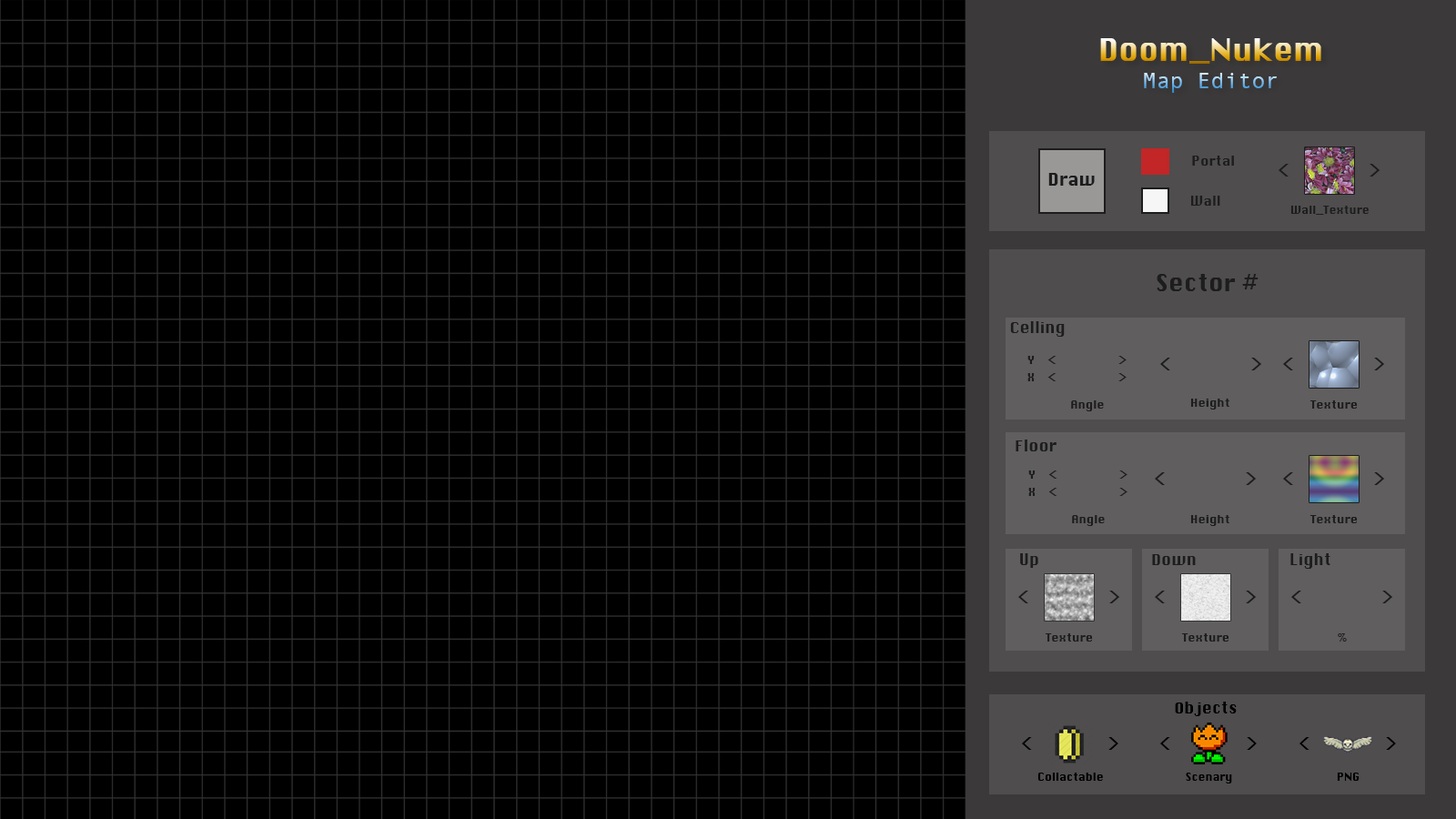
<style>
.page{position:relative;width:1456px;height:819px;background:#000000}
.page>*{position:absolute;margin:0}
.t1{font:30.3px "Silom"}
.t2{font:22.7px "AndaleMono"}
.t3{font:13.3px "Silom";color:#1d1d1d}
.t4{font:17.1px "Silom";color:#1d1d1d}
.t5{font:21.5px "Silom";color:#1d1d1d}
.t6{font:10.8px "Silom";color:#1d1d1d}
.t7{font:22.7px "Silom";color:#1d1d1d}
.t8{font:15.2px "Silom";color:#1d1d1d}
.t9{font:11.4px "Silom";color:#1d1d1d}
.t10{font:13.8px "Silom";color:#1d1d1d;scale:1.24 1}
.t11{font:15.2px "Silom";color:#000000}
.t12{font:21.6px "Silom";color:#000000}
.t13{font:11.4px "Silom";color:#000000;scale:0.95 1}
</style>
<div class="page">
<p class="t1" style="left:1100px;top:38px;width:221px;height:55px;text-align:center">Doom_Nukem<br><span class="t2">Map Editor</span></p>
<p class="t3" style="left:1192px;top:156px;width:42px;height:10px">Portal</p>
<p class="t4" style="left:1048px;top:173px;width:47px;height:13px">Draw</p>
<p class="t5" style="left:1279px;top:164px;width:10px;height:13px">&lt;</p>
<p class="t5" style="left:1370px;top:164px;width:10px;height:13px">&gt;</p>
<p class="t3" style="left:1191px;top:196px;width:29px;height:10px">Wall</p>
<p class="t6" style="left:1290px;top:206px;width:79px;height:9px">Wall_Texture</p>
<p class="t7" style="left:1157px;top:274px;width:102px;height:17px">Sector #</p>
<p class="t8" style="left:1010px;top:321px;width:55px;height:16px">Celling</p>
<p class="t9" style="left:1027px;top:356px;width:8px;height:8px">Y</p>
<p class="t10" style="left:1047px;top:356px;width:9px;height:8px">&lt;</p>
<p class="t10" style="left:1118px;top:356px;width:9px;height:8px">&gt;</p>
<p class="t5" style="left:1160px;top:358px;width:10px;height:12px">&lt;</p>
<p class="t5" style="left:1251px;top:358px;width:11px;height:12px">&gt;</p>
<p class="t5" style="left:1283px;top:358px;width:10px;height:12px">&lt;</p>
<p class="t5" style="left:1374px;top:358px;width:11px;height:12px">&gt;</p>
<p class="t9" style="left:1027px;top:373px;width:8px;height:8px">X</p>
<p class="t10" style="left:1047px;top:373px;width:9px;height:8px">&lt;</p>
<p class="t10" style="left:1118px;top:373px;width:9px;height:8px">&gt;</p>
<p class="t9" style="left:1071px;top:400px;width:33px;height:11px">Angle</p>
<p class="t9" style="left:1190px;top:399px;width:39px;height:10px">Height</p>
<p class="t9" style="left:1309px;top:400px;width:49px;height:9px">Texture</p>
<p class="t8" style="left:1016px;top:440px;width:40px;height:11px">Floor</p>
<p class="t9" style="left:1028px;top:470px;width:8px;height:9px">Y</p>
<p class="t10" style="left:1048px;top:470px;width:9px;height:9px">&lt;</p>
<p class="t10" style="left:1119px;top:470px;width:8px;height:9px">&gt;</p>
<p class="t5" style="left:1155px;top:472px;width:10px;height:13px">&lt;</p>
<p class="t5" style="left:1246px;top:472px;width:11px;height:13px">&gt;</p>
<p class="t5" style="left:1283px;top:472px;width:10px;height:13px">&lt;</p>
<p class="t5" style="left:1374px;top:472px;width:11px;height:13px">&gt;</p>
<p class="t9" style="left:1028px;top:488px;width:8px;height:8px">X</p>
<p class="t10" style="left:1048px;top:488px;width:9px;height:8px">&lt;</p>
<p class="t10" style="left:1119px;top:488px;width:8px;height:8px">&gt;</p>
<p class="t9" style="left:1072px;top:515px;width:33px;height:11px">Angle</p>
<p class="t9" style="left:1190px;top:515px;width:39px;height:11px">Height</p>
<p class="t9" style="left:1309px;top:515px;width:49px;height:8px">Texture</p>
<p class="t8" style="left:1020px;top:553px;width:18px;height:15px">Up</p>
<p class="t8" style="left:1152px;top:554px;width:44px;height:11px">Down</p>
<p class="t8" style="left:1290px;top:553px;width:40px;height:16px">Light</p>
<p class="t5" style="left:1018px;top:591px;width:10px;height:12px">&lt;</p>
<p class="t5" style="left:1109px;top:591px;width:11px;height:12px">&gt;</p>
<p class="t5" style="left:1155px;top:591px;width:10px;height:12px">&lt;</p>
<p class="t5" style="left:1246px;top:591px;width:11px;height:12px">&gt;</p>
<p class="t5" style="left:1291px;top:591px;width:10px;height:12px">&lt;</p>
<p class="t5" style="left:1382px;top:591px;width:11px;height:12px">&gt;</p>
<p class="t9" style="left:1045px;top:633px;width:48px;height:9px">Texture</p>
<p class="t9" style="left:1181px;top:633px;width:48px;height:9px">Texture</p>
<p class="t9" style="left:1338px;top:633px;width:9px;height:9px">%</p>
<p class="t11" style="left:1175px;top:702px;width:62px;height:14px">Objects</p>
<p class="t12" style="left:1022px;top:737px;width:10px;height:13px">&lt;</p>
<p class="t12" style="left:1108px;top:737px;width:10px;height:13px">&gt;</p>
<p class="t12" style="left:1160px;top:737px;width:10px;height:13px">&lt;</p>
<p class="t12" style="left:1247px;top:737px;width:10px;height:13px">&gt;</p>
<p class="t12" style="left:1299px;top:737px;width:10px;height:13px">&lt;</p>
<p class="t12" style="left:1386px;top:737px;width:10px;height:13px">&gt;</p>
<p class="t13" style="left:1037px;top:773px;width:66px;height:8px">Collactable</p>
<p class="t13" style="left:1186px;top:773px;width:46px;height:10px">Scenary</p>
<p class="t13" style="left:1337px;top:773px;width:23px;height:8px">PNG</p>
</div>
